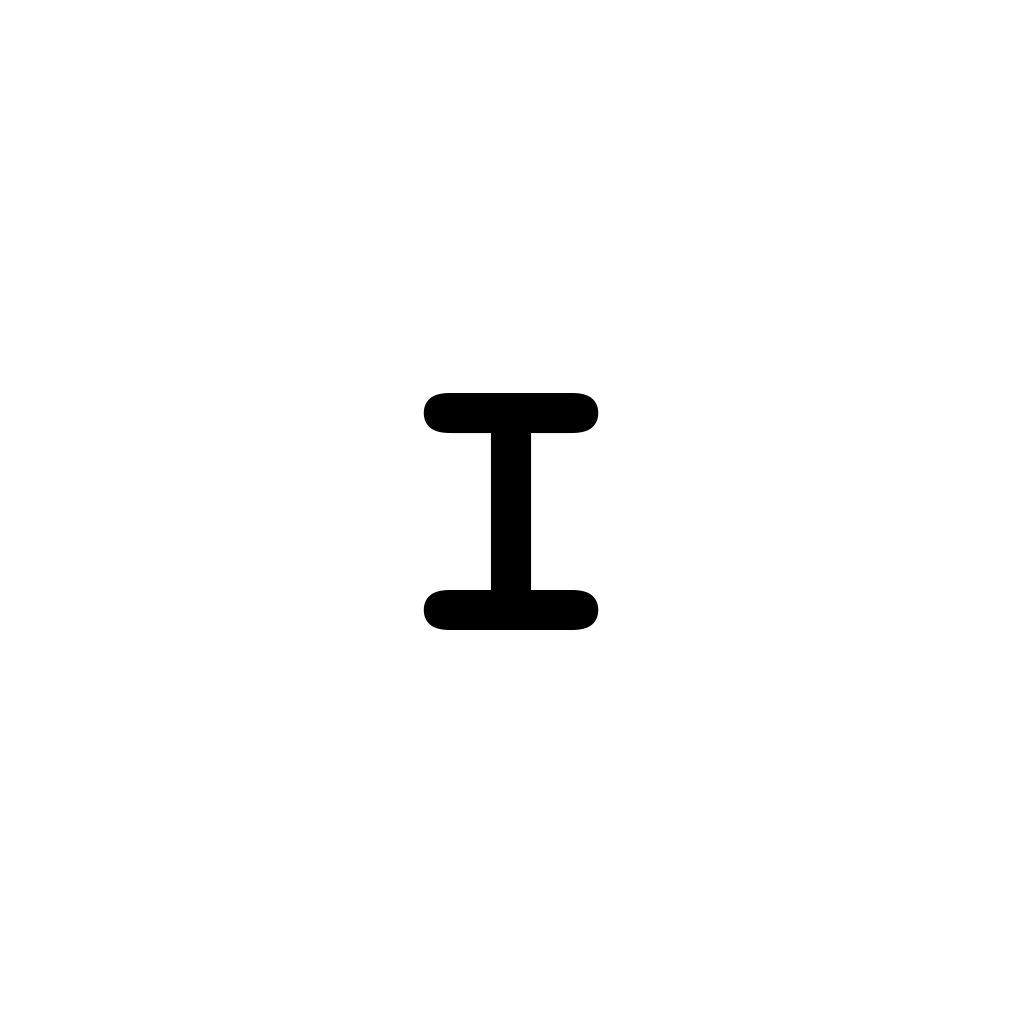
<style>
.page{position:relative;width:1024px;height:1024px;background:#ffffff}
.page>*{position:absolute;margin:0}
.t1{font:400px "CourierNewPS-BoldMT";color:#000000}
</style>
<div class="page">
<p class="t1" style="left:423px;top:393px;width:176px;height:237px">I</p>
</div>
